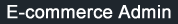
<style>
.page{position:relative;width:178px;height:24px;background:#1f262d}
.page>*{position:absolute;margin:0}
.t1{font:18px "ArialMT";color:#ffffff;font-weight:bold}
</style>
<div class="page">
<p class="t1" style="left:7px;top:5px;width:164px;height:14px">E-commerce Admin</p>
</div>
